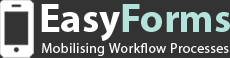
<style>
.page{position:relative;width:230px;height:58px;background:#333333}
.page>*{position:absolute;margin:0}
.t1{font:40.9px "MyriadPro-Bold";color:#b4e3dc}
.t2{font:40.9px "MyriadPro-Bold";color:#ffffff}
.t3{font:13.8px "MyriadPro-Regular";letter-spacing:0.04em;color:#fcfdfd}
</style>
<div class="page">
<p class="t1" style="left:41px;top:4px;width:189px;height:37px"><span class="t2">Easy</span>Forms</p>
<p class="t3" style="left:42px;top:43px;width:187px;height:13px">Mobilising Workflow Processes</p>
</div>
